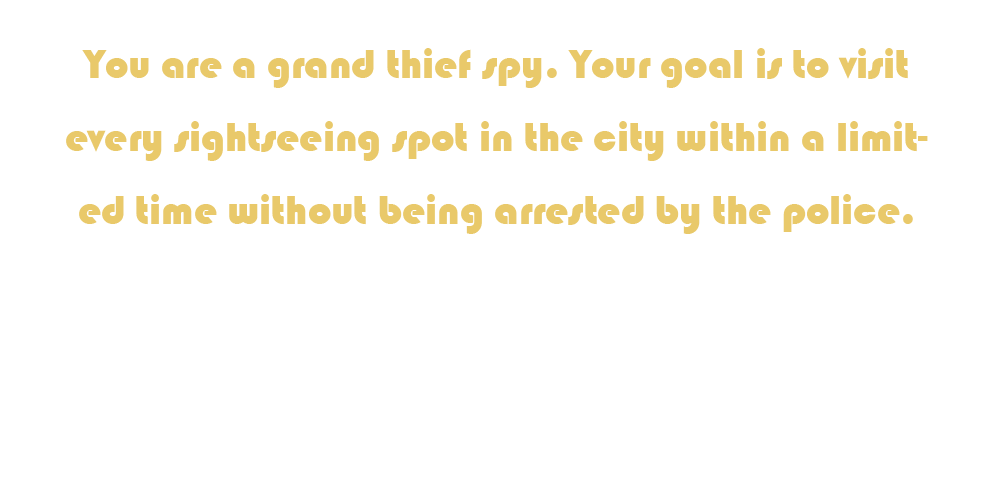
<style>
.page{position:relative;width:1000px;height:500px;background:#ffffff}
.page>*{position:absolute;margin:0}
.t1{font:41.7px "Bauhaus93";color:#e9c96a}
</style>
<div class="page">
<p class="t1" style="left:66px;top:48px;width:862px;height:186px;text-align:center">You are a grand thief spy. Your goal is to visit every sightseeing spot in the city within a limited time without being arrested by the police.</p>
</div>
